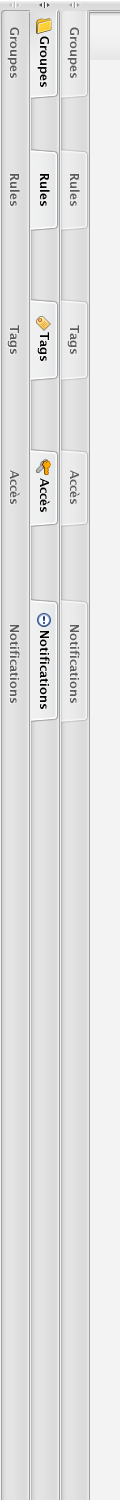
<style>
.page{position:relative;width:120px;height:1500px;background:#f3f3f3}
.page>*{position:absolute;margin:0}
.t1{font:12px "LucidaGrande-Bold";color:#5a5a5a}
.t2{font:12px "LucidaGrande-Bold";color:#5e5e5e}
.t3{font:12px "LucidaGrande-Bold";color:#000000}
</style>
<div class="page">
<p class="t1" style="left:7px;top:27px;width:12px;height:51px;rotate:90deg">Groupes</p>
<p class="t2" style="left:67px;top:27px;width:12px;height:51px;rotate:90deg">Groupes</p>
<p class="t3" style="left:37px;top:36px;width:12px;height:51px;rotate:90deg">Groupes</p>
<p class="t1" style="left:10px;top:174px;width:10px;height:32px;rotate:90deg">Rules</p>
<p class="t3" style="left:40px;top:174px;width:10px;height:32px;rotate:90deg">Rules</p>
<p class="t2" style="left:70px;top:174px;width:10px;height:32px;rotate:90deg">Rules</p>
<p class="t1" style="left:7px;top:325px;width:12px;height:29px;rotate:90deg">Tags</p>
<p class="t2" style="left:67px;top:325px;width:12px;height:29px;rotate:90deg">Tags</p>
<p class="t3" style="left:37px;top:332px;width:12px;height:29px;rotate:90deg">Tags</p>
<p class="t1" style="left:10px;top:470px;width:10px;height:34px;rotate:90deg">Accès</p>
<p class="t2" style="left:70px;top:470px;width:10px;height:34px;rotate:90deg">Accès</p>
<p class="t3" style="left:40px;top:478px;width:10px;height:34px;rotate:90deg">Accès</p>
<p class="t1" style="left:10px;top:625px;width:10px;height:78px;rotate:90deg">Notifications</p>
<p class="t2" style="left:70px;top:625px;width:10px;height:78px;rotate:90deg">Notifications</p>
<p class="t3" style="left:40px;top:631px;width:10px;height:78px;rotate:90deg">Notifications</p>
</div>
